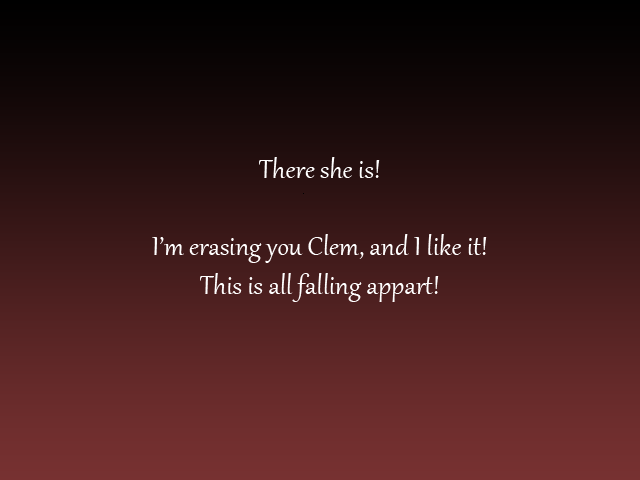
<style>
.page{position:relative;width:640px;height:480px}
.page>*{position:absolute;margin:0}
.t1{font:32px "Gabriola";color:#ffffff}
.t2{font:37.3px "Gabriola";color:#ffffff}
</style>
<div class="page">
<p class="t1" style="left:152px;top:157px;width:335px;height:145px;text-align:center"><span class="t2"><br></span><br><br><br>There she is!<br><br>I’m erasing you Clem, and I like it!<br>This is all falling appart!</p>
</div>
